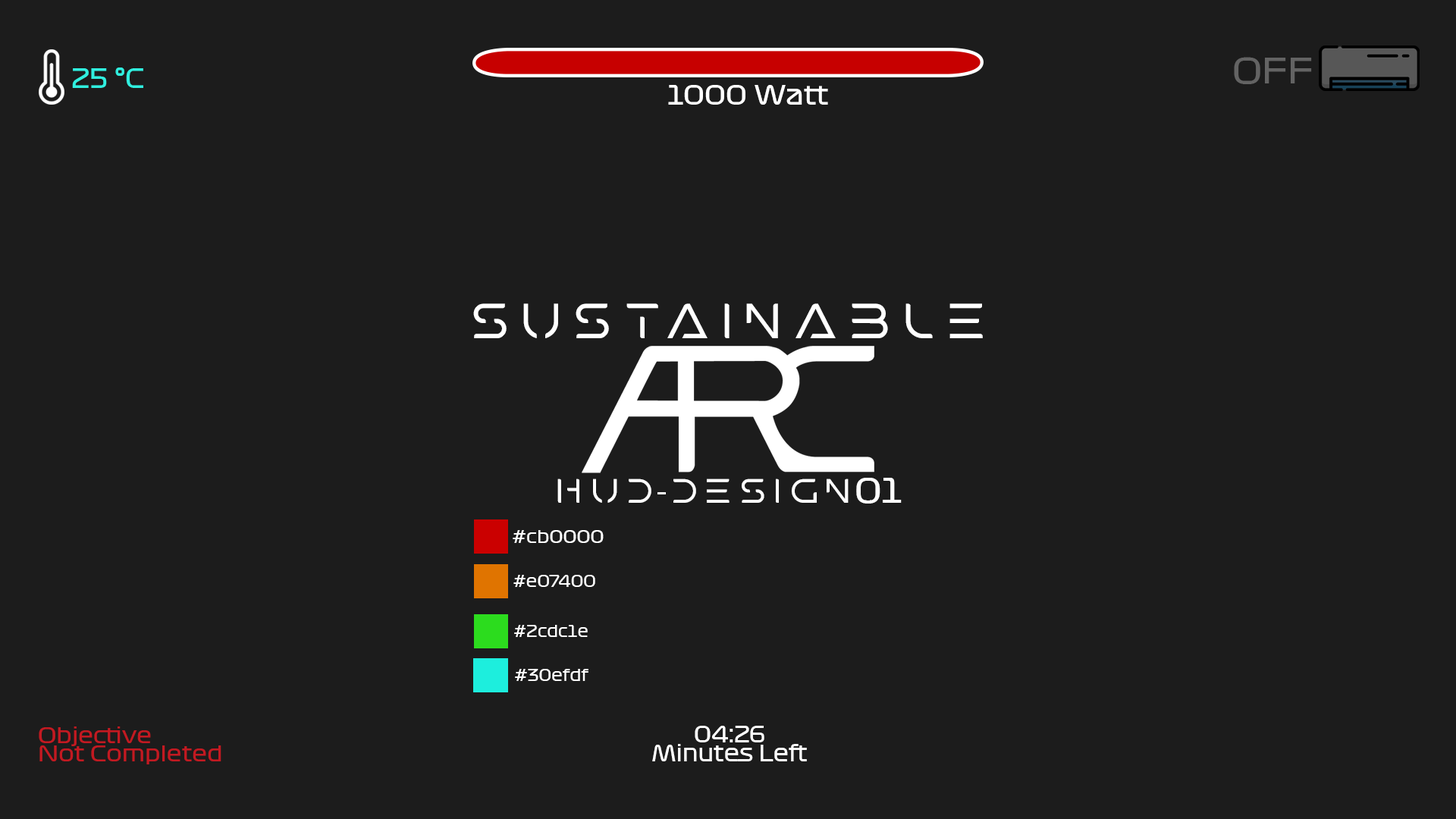
<style>
.page{position:relative;width:1456px;height:819px;background:#1c1c1c}
.page>*{position:absolute;margin:0}
.t1{font:34.2px "Formula1-Display-Regular";color:#636363}
.t2{font:25.4px "Formula1-Display-Regular";color:#30efdf}
.t3{font:26.4px "Formula1-Display-Regular";color:#ffffff}
.t4{font:49.1px "MarsRegular";color:#ffffff}
.t5{font:33.7px "MarsRegular";color:#ffffff}
.t6{font:33.7px "MyriadPro-Regular";color:#ffffff}
.t7{font:33.7px "Formula1-Display-Regular";color:#ffffff}
.t8{font:17.4px "Formula1-Display-Regular";color:#ffffff}
.t9{font:16px "Formula1-Display-Regular";color:#ffffff}
.t10{font:16.4px "Formula1-Display-Regular";color:#ffffff;scale:0.93 1}
.t11{font:16.4px "Formula1-Display-Regular";color:#ffffff;scale:0.96 1}
.t12{font:21.8px/18.7px "Formula1-Display-Regular";color:#ffffff}
.t13{font:21.3px/18.3px "Formula1-Display-Regular";color:#c31921}
</style>
<div class="page">
<p class="t1" style="left:1234px;top:57px;width:78px;height:27px">OFF</p>
<p class="t2" style="left:72px;top:67px;width:71px;height:21px">25 °C</p>
<p class="t3" style="left:668px;top:85px;width:160px;height:20px">1000 Watt</p>
<p class="t4" style="left:473px;top:303px;width:510px;height:35px">Sustainable</p>
<p class="t5" style="left:557px;top:478px;width:345px;height:26px">HUD<span class="t6">-</span>Design<span class="t7">01</span></p>
<p class="t8" style="left:513px;top:530px;width:91px;height:13px">#cb0000</p>
<p class="t9" style="left:513px;top:575px;width:82px;height:12px">#e07400</p>
<p class="t10" style="left:514px;top:625px;width:74px;height:12px">#2cdc1e</p>
<p class="t11" style="left:515px;top:669px;width:73px;height:12px">#30efdf</p>
<p class="t12" style="left:652px;top:726px;width:155px;height:35px;text-align:center">04:26<br>Minutes Left</p>
<p class="t13" style="left:39px;top:726px;width:182px;height:38px">Objective <br>Not Completed</p>
</div>
